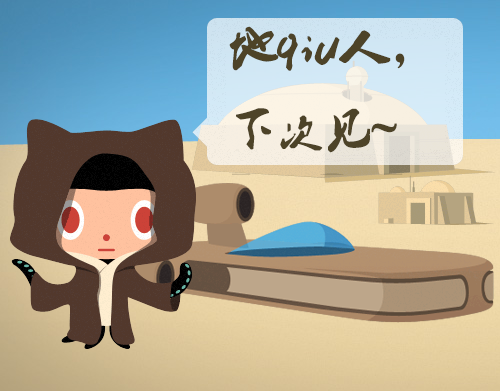
<style>
.page{position:relative;width:500px;height:391px}
.page>*{position:absolute;margin:0}
.t1{font:45.8px "Ò¶¸ùÓÑÃ«±ÊÐÐÊé¼òÌå";color:#4d4328;font-weight:bold}
.t2{font:45.8px "Ò¶¸ùÓÑÌØÉ«¼òÌåÉý¼¶°æ";color:#4d4328;font-weight:bold}
</style>
<div class="page">
<p class="t1" style="left:229px;top:26px;width:176px;height:127px">地<span class="t2">qiu</span>人，<br>下次见~</p>
</div>
